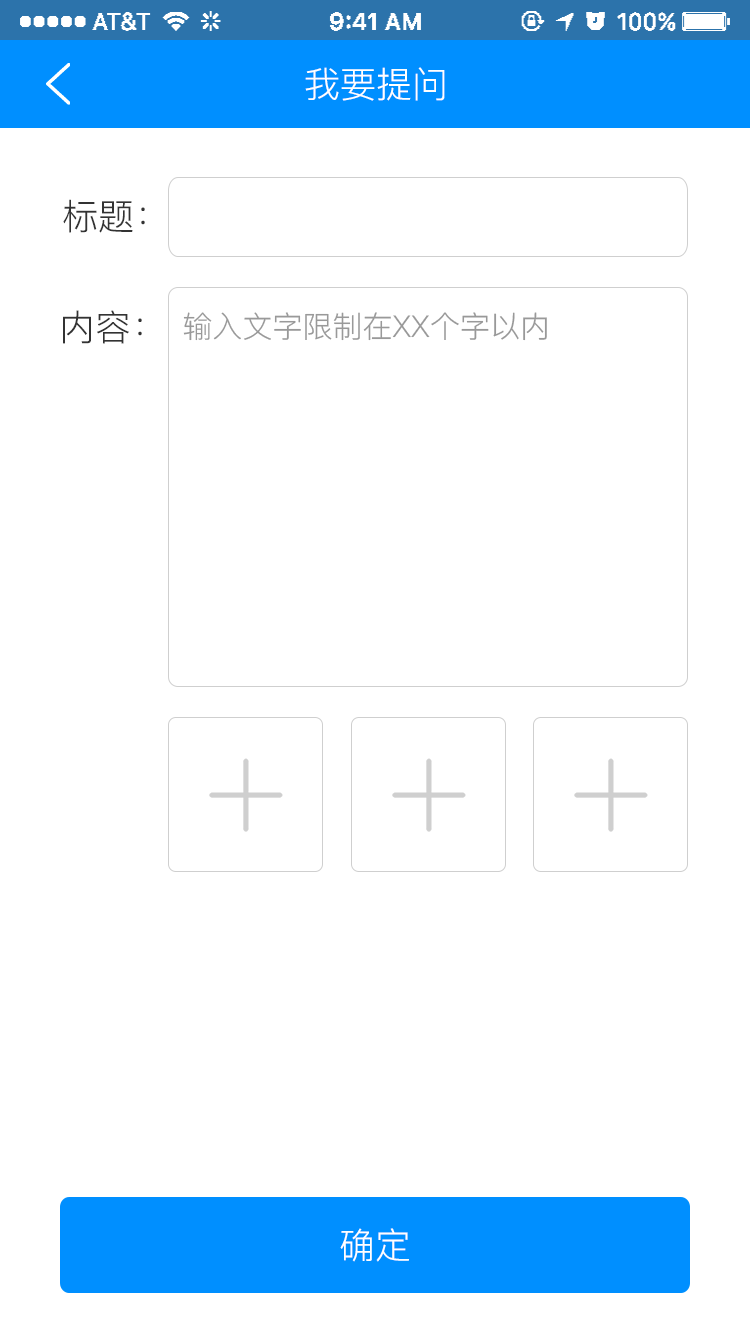
<style>
.page{position:relative;width:750px;height:1334px;background:#ffffff}
.page>*{position:absolute;margin:0}
.t1{font:36px "PingFang-SC-Regular";color:#ffffff}
.t2{font:36px "PingFang-SC-Regular";color:#333333}
.t3{font:30px "PingFang-SC-Regular";color:#999999}
</style>
<div class="page">
<p class="t1" style="left:305px;top:67px;width:140px;height:34px">我要提问</p>
<p class="t2" style="left:63px;top:199px;width:82px;height:34px">标题：</p>
<p class="t2" style="left:63px;top:310px;width:79px;height:34px">内容：</p>
<p class="t3" style="left:183px;top:312px;width:364px;height:29px">输入文字限制在XX个字以内</p>
<p class="t1" style="left:340px;top:1228px;width:69px;height:34px">确定</p>
</div>
